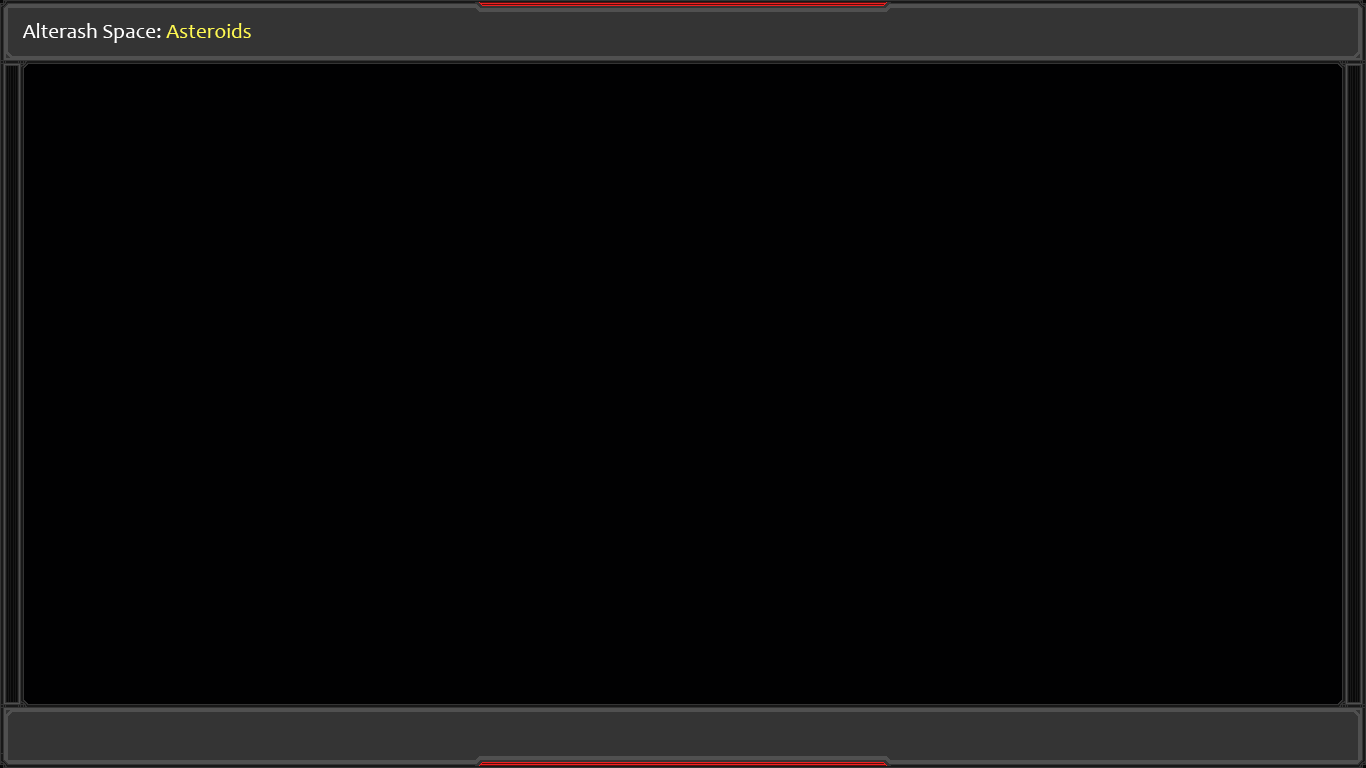
<style>
.page{position:relative;width:1366px;height:768px;background:#010102}
.page>*{position:absolute;margin:0}
.t1{font:21.3px "Candara";color:#ffffff}
.t2{font:21.3px "Candara";color:#fff952}
</style>
<div class="page">
<p class="t1" style="left:23px;top:23px;width:228px;height:20px">Alterash Space: <span class="t2">Asteroids</span></p>
</div>
